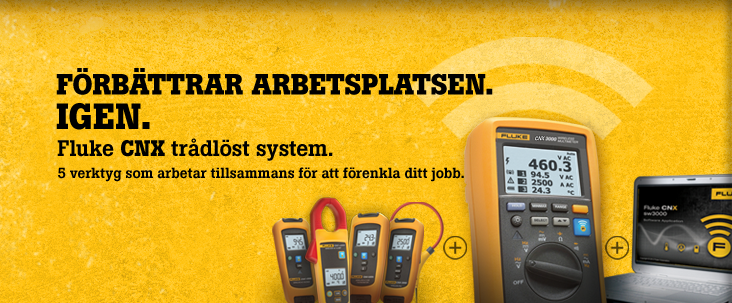
<style>
.page{position:relative;width:732px;height:303px}
.page>*{position:absolute;margin:0}
.t1{font:29px "BotonPro-Bold";letter-spacing:-0.005em;color:#000000;text-transform:uppercase}
.t2{font:36px "BotonPro-Bold";letter-spacing:-0.005em;color:#000000;text-transform:uppercase}
.t3{font:14.5px "BotonPro-Medium";letter-spacing:-0.01em;color:#000000}
.t4{font:22.4px "BotonPro-Medium";letter-spacing:-0.01em;color:#000000}
.t5{font:22.4px "BotonPro-Bold";letter-spacing:-0.01em;color:#000000}
</style>
<div class="page">
<p class="t1" style="left:56px;top:68px;width:437px;height:27px">Förbättrar arbetsplatsen.</p>
<p class="t2" style="left:56px;top:103px;width:94px;height:27px">Igen.</p>
<p class="t3" style="left:57px;top:138px;width:407px;height:44px"><span class="t4">Fluke </span><span class="t5">CNX</span><span class="t4"> trådlöst system.<br></span>5 verktyg som arbetar tillsammans för att förenkla ditt jobb.</p>
</div>
